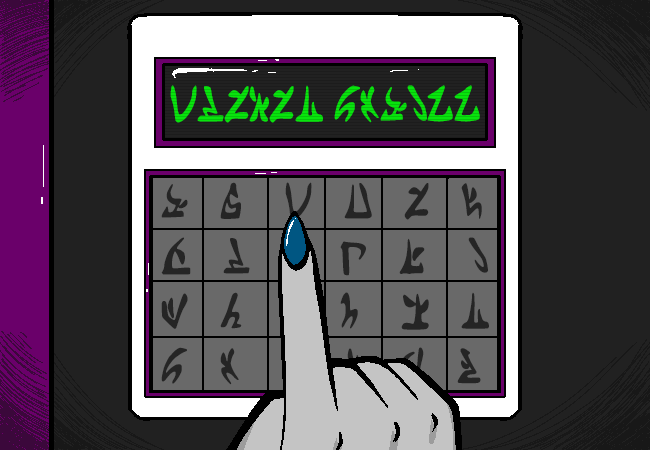
<style>
.page{position:relative;width:650px;height:450px;background:#212121}
.page>*{position:absolute;margin:0}
.t1{font:61px "HiveswapAlternian-Regular";color:#05f90b;scale:0.7 1}
</style>
<div class="page">
<p class="t1" style="left:170px;top:85px;width:310px;height:38px">CHEVER STALII</p>
</div>
